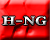
<style>
.page{position:relative;width:50px;height:40px}
.page>*{position:absolute;margin:0}
.t1{font:11.2px "MyungjoXB-HM";scale:1.53 1}
</style>
<div class="page">
<p class="t1" style="left:2px;top:16px;width:45px;height:9px">H-NG</p>
</div>
